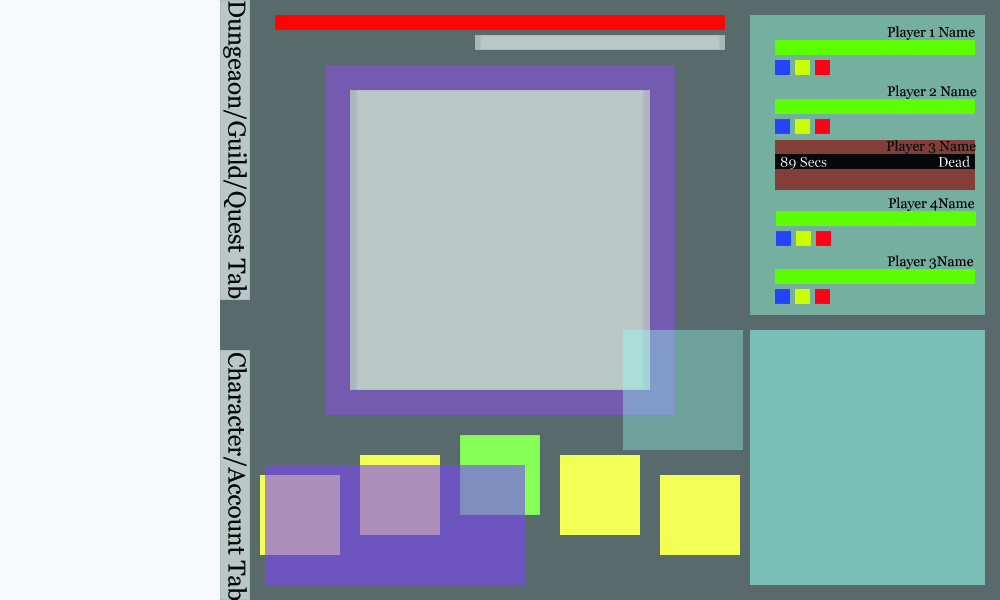
<style>
.page{position:relative;width:1000px;height:600px;background:#586a6b}
.page>*{position:absolute;margin:0}
.t1{font:24.4px "Georgia";color:#060808}
.t2{font:13.9px "Georgia";color:#060808}
.t3{font:13.9px "Georgia";color:#fdfefe}
</style>
<div class="page">
<p class="t1" style="left:223px;top:1px;width:24px;height:298px;rotate:90deg">Dungeaon/Guild/Quest Tab</p>
<p class="t2" style="left:887px;top:26px;width:88px;height:14px">Player 1 Name</p>
<p class="t2" style="left:887px;top:85px;width:90px;height:14px">Player 2 Name</p>
<p class="t2" style="left:886px;top:140px;width:90px;height:14px">Player 3 Name</p>
<p class="t3" style="left:780px;top:156px;width:47px;height:14px">89 Secs</p>
<p class="t3" style="left:938px;top:156px;width:32px;height:11px">Dead</p>
<p class="t2" style="left:888px;top:197px;width:87px;height:14px">Player 4Name</p>
<p class="t2" style="left:887px;top:255px;width:87px;height:14px">Player 3Name</p>
<p class="t1" style="left:223px;top:353px;width:24px;height:248px;rotate:90deg">Character/Account Tab</p>
</div>
